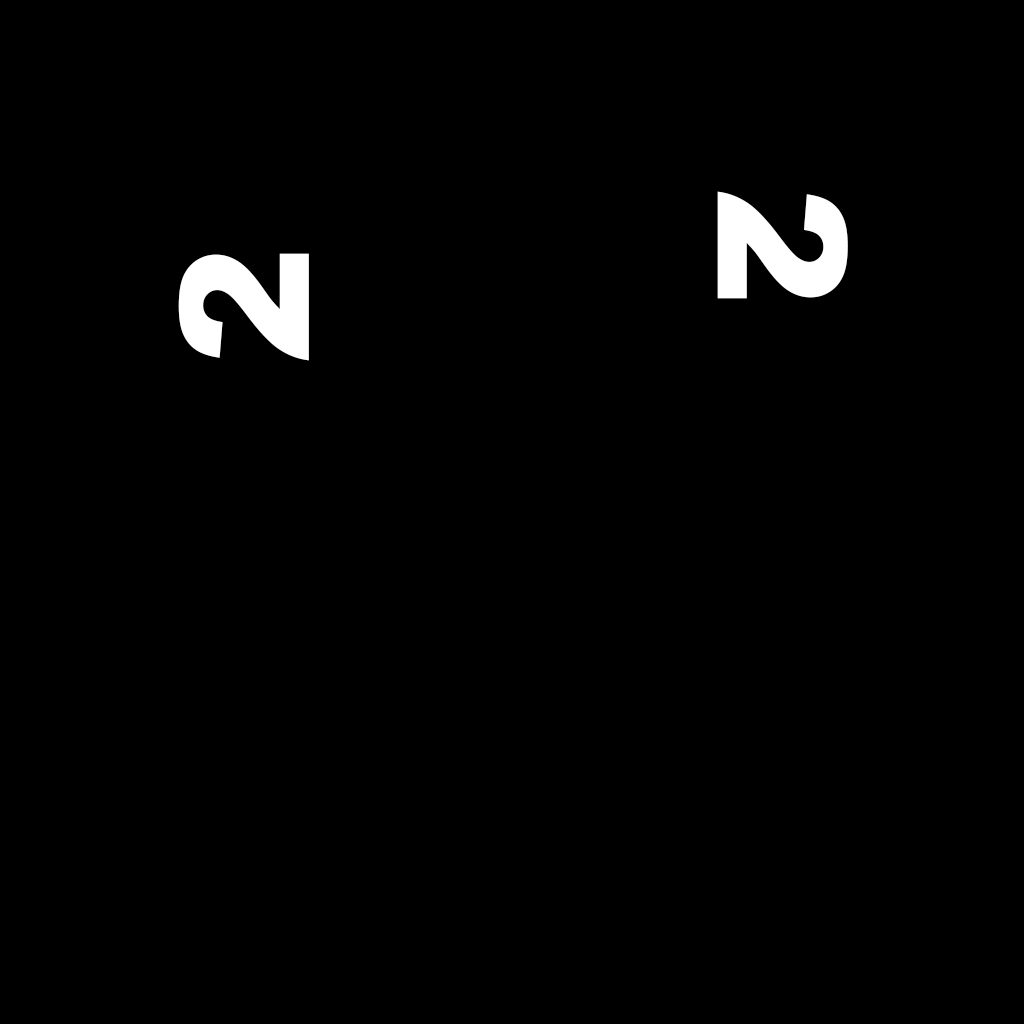
<style>
.page{position:relative;width:1024px;height:1024px;background:#000000}
.page>*{position:absolute;margin:0}
.t1{font:178.5px "Arial-Black";color:#ffffff}
</style>
<div class="page">
<p class="t1" style="left:717px;top:191px;width:131px;height:108px;rotate:90deg">2</p>
<p class="t1" style="left:178px;top:253px;width:131px;height:108px;rotate:-90deg">2</p>
</div>
